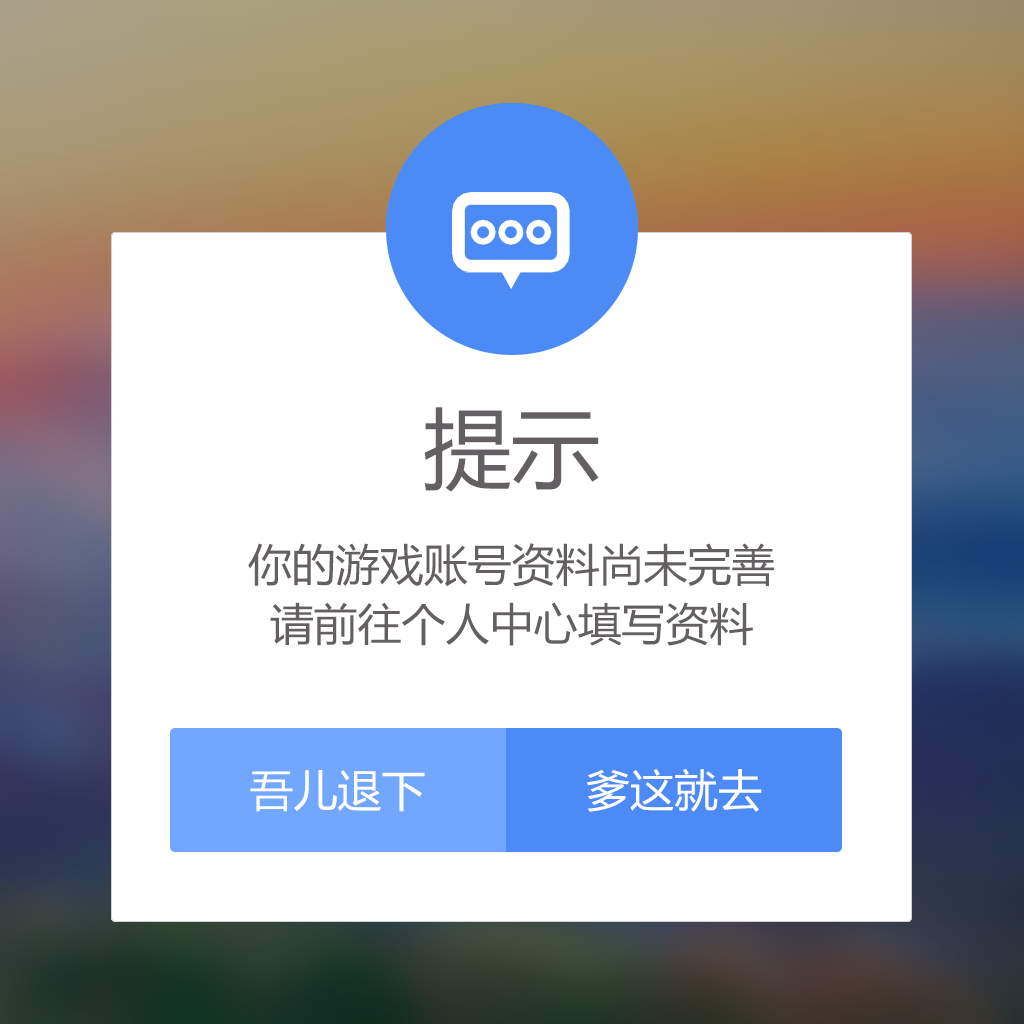
<style>
.page{position:relative;width:1024px;height:1024px;background:#ffffff}
.page>*{position:absolute;margin:0}
.t1{font:88px "MicrosoftYaHei";color:#635f63}
.t2{font:44px/59.2px "MicrosoftYaHei";color:#635f63}
.t3{font:44px "MicrosoftYaHei";color:#ffffff}
</style>
<div class="page">
<p class="t1" style="left:424px;top:407px;width:175px;height:85px">提示</p>
<p class="t1" style="left:424px;top:407px;width:175px;height:85px">提示</p>
<p class="t1" style="left:424px;top:407px;width:175px;height:85px">提示</p>
<p class="t2" style="left:248px;top:543px;width:527px;height:103px;text-align:center">你的游戏账号资料尚未完善<br>请前往个人中心填写资料</p>
<p class="t2" style="left:248px;top:543px;width:527px;height:103px;text-align:center">你的游戏账号资料尚未完善<br>请前往个人中心填写资料</p>
<p class="t3" style="left:250px;top:770px;width:175px;height:42px">吾儿退下</p>
<p class="t3" style="left:586px;top:769px;width:176px;height:43px">爹这就去</p>
</div>
